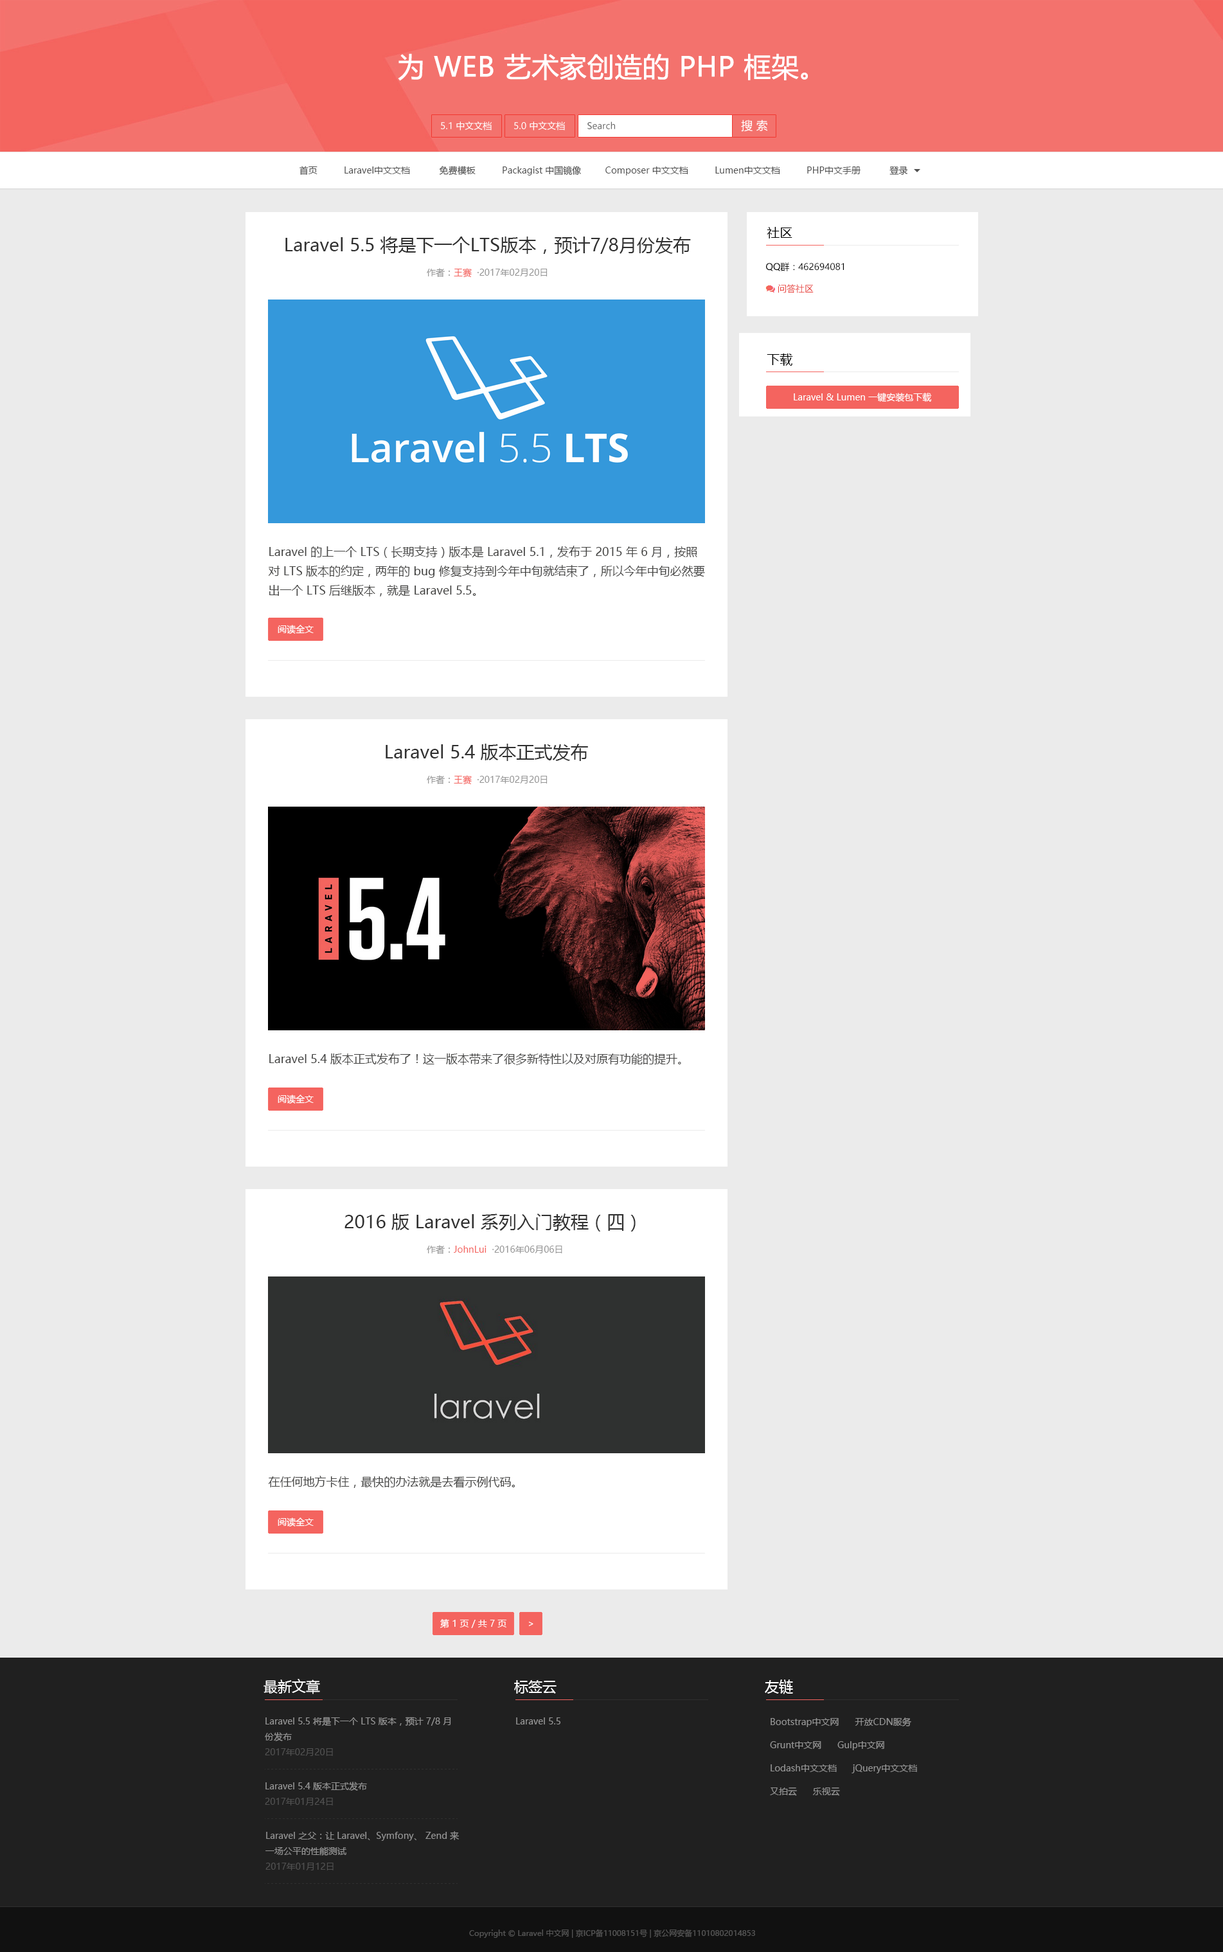
<style>
.page{position:relative;width:1223px;height:1952px;background:#ebebeb}
.page>*{position:absolute;margin:0}
.t1{font:27px "MicrosoftYaHei";color:#ffffff;font-weight:bold}
.t2{font:9px "MicrosoftYaHei";color:#ffffff}
.t3{font:9px "MicrosoftYaHei";color:#666666}
.t4{font:11.6px "MicrosoftYaHei";color:#ffffff}
.t5{font:9px "MicrosoftYaHei";color:#505050}
.t6{font:12.9px "MicrosoftYaHei";color:#000000}
.t7{font:18px "MicrosoftYaHei";color:#303030}
.t8{font:9px "MicrosoftYaHei";color:#959595}
.t9{font:9px "MicrosoftYaHei";color:#f4645f}
.t10{font:9px "MicrosoftYaHei";color:#000000}
.t11{font:9px "MicrosoftYaHei";color:#e83d37}
.t12{font:11.6px/19.3px "MicrosoftYaHei";color:#444443}
.t13{font:11.6px "MicrosoftYaHei";color:#444443}
.t14{font:14.1px "MicrosoftYaHei";color:#ffffff}
.t15{font:9px/15.4px "MicrosoftYaHei";color:#959595}
.t16{font:9px/23.1px "MicrosoftYaHei";color:#959595}
.t17{font:7.7px "MicrosoftYaHei";color:#555555}
</style>
<div class="page">
<p class="t1" style="left:398px;top:53px;width:410px;height:28px">为 WEB 艺术家创造的 PHP 框架。</p>
<p class="t2" style="left:441px;top:122px;width:51px;height:8px">5.1 中文文档</p>
<p class="t2" style="left:514px;top:122px;width:51px;height:8px">5.0 中文文档</p>
<p class="t3" style="left:588px;top:122px;width:27px;height:7px">Search</p>
<p class="t4" style="left:741px;top:120px;width:27px;height:12px">搜 索</p>
<p class="t5" style="left:300px;top:166px;width:608px;height:10px">首页          Laravel中文文档           免费模板          Packagist 中国镜像         Composer 中文文档          Lumen中文文档          PHP中文手册           登录</p>
<p class="t6" style="left:767px;top:227px;width:26px;height:12px">社区</p>
<p class="t7" style="left:285px;top:237px;width:406px;height:17px">Laravel 5.5 将是下一个LTS版本，预计7/8月份发布</p>
<p class="t8" style="left:427px;top:268px;width:121px;height:10px">作者：<span class="t9">王赛</span>  ·2017年02月20日</p>
<p class="t10" style="left:766px;top:262px;width:78px;height:9px">QQ群：462694081</p>
<p class="t11" style="left:779px;top:284px;width:35px;height:9px">问答社区</p>
<p class="t6" style="left:767px;top:354px;width:26px;height:12px">下载</p>
<p class="t2" style="left:794px;top:393px;width:138px;height:9px">Laravel &amp; Lumen 一键安装包下载</p>
<p class="t12" style="left:268px;top:546px;width:437px;height:51px">Laravel 的上一个 LTS（长期支持）版本是 Laravel 5.1，发布于 2015 年 6 月，按照<br>对 LTS 版本的约定，两年的 bug 修复支持到今年中旬就结束了，所以今年中旬必然要<br>出一个 LTS 后继版本，就是 Laravel 5.5。</p>
<p class="t2" style="left:278px;top:625px;width:36px;height:9px">阅读全文</p>
<p class="t7" style="left:386px;top:744px;width:202px;height:17px">Laravel 5.4 版本正式发布</p>
<p class="t8" style="left:427px;top:775px;width:121px;height:10px">作者：<span class="t9">王赛</span>  ·2017年02月20日</p>
<p class="t13" style="left:269px;top:1053px;width:412px;height:12px">Laravel 5.4 版本正式发布了！这一版本带来了很多新特性以及对原有功能的提升。</p>
<p class="t2" style="left:278px;top:1095px;width:36px;height:9px">阅读全文</p>
<p class="t7" style="left:345px;top:1214px;width:291px;height:18px">2016 版 Laravel 系列入门教程（四）</p>
<p class="t8" style="left:427px;top:1245px;width:135px;height:9px">作者：<span class="t9">JohnLui</span>  ·2016年06月06日</p>
<p class="t13" style="left:268px;top:1476px;width:247px;height:12px">在任何地方卡住，最快的办法就是去看示例代码。</p>
<p class="t2" style="left:278px;top:1518px;width:36px;height:9px">阅读全文</p>
<p class="t2" style="left:440px;top:1619px;width:67px;height:9px">第 1 页 / 共 7 页</p>
<p class="t2" style="left:528px;top:1622px;width:6px;height:4px">&gt;</p>
<p class="t14" style="left:264px;top:1679px;width:56px;height:16px">最新文章</p>
<p class="t14" style="left:514px;top:1680px;width:43px;height:14px">标签云</p>
<p class="t14" style="left:765px;top:1680px;width:28px;height:15px">友链</p>
<p class="t15" style="left:265px;top:1717px;width:186px;height:25px">Laravel 5.5 将是下一个 LTS 版本，预计 7/8 月<br>份发布</p>
<p class="t8" style="left:516px;top:1718px;width:45px;height:7px">Laravel 5.5</p>
<p class="t16" style="left:770px;top:1718px;width:147px;height:78px">Bootstrap中文网      开放CDN服务 <br>Grunt中文网      Gulp中文网<br>Lodash中文文档      jQuery中文文档<br>又拍云      乐视云</p>
<p class="t5" style="left:265px;top:1749px;width:68px;height:7px">2017年02月20日</p>
<p class="t8" style="left:266px;top:1782px;width:101px;height:9px">Laravel 5.4 版本正式发布</p>
<p class="t5" style="left:265px;top:1798px;width:68px;height:8px">2017年01月24日</p>
<p class="t15" style="left:266px;top:1832px;width:193px;height:24px">Laravel 之父：让 Laravel、Symfony、 Zend 来<br>一场公平的性能测试</p>
<p class="t5" style="left:266px;top:1863px;width:68px;height:8px">2017年01月12日</p>
<p class="t17" style="left:469px;top:1929px;width:286px;height:9px">Copyright © Laravel 中文网 | 京ICP备11008151号 | 京公网安备11010802014853</p>
</div>
